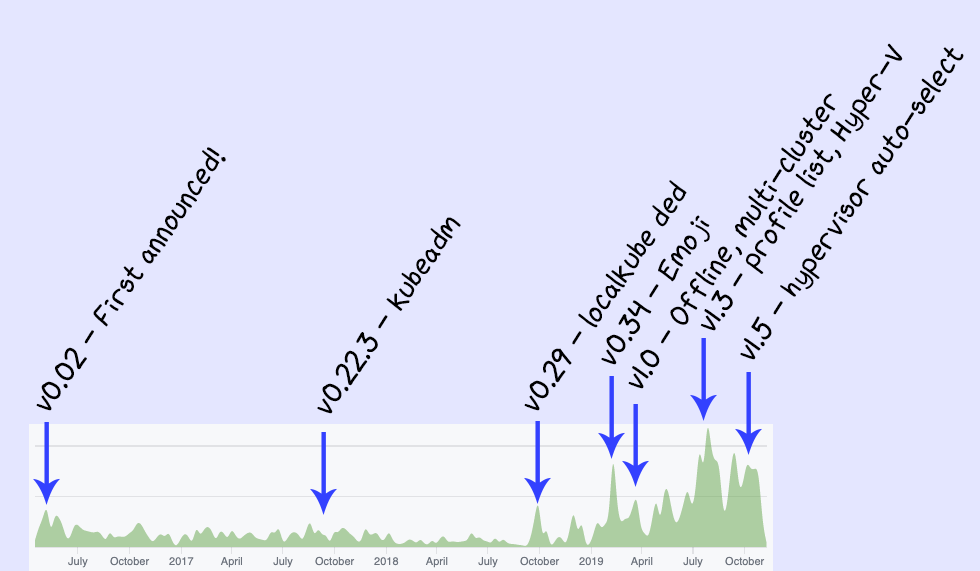
<style>
.page{position:relative;width:980px;height:571px;background:#e4e6ff}
.page>*{position:absolute;margin:0}
.t1{font:30px "xkcdScript";color:#000000}
</style>
<div class="page">
<p class="t1" style="left:700px;top:43px;width:203px;height:288px;rotate:-55deg">v1.3 - profile list, Hyper-V</p>
<p class="t1" style="left:740px;top:47px;width:224px;height:313px;rotate:-55deg">v1.5 - hypervisor auto-select</p>
<p class="t1" style="left:628px;top:93px;width:208px;height:296px;rotate:-55deg">v1.0 - Offline, multi-cluster</p>
<p class="t1" style="left:36px;top:147px;width:190px;height:264px;rotate:-55deg">v0.02 - First announced!</p>
<p class="t1" style="left:524px;top:180px;width:163px;height:231px;rotate:-55deg">v0.29 - localkube ded</p>
<p class="t1" style="left:317px;top:217px;width:144px;height:197px;rotate:-55deg">v0.22.3 - kubeadm</p>
<p class="t1" style="left:601px;top:215px;width:109px;height:150px;rotate:-55deg">v0.34 - Emoji</p>
</div>
